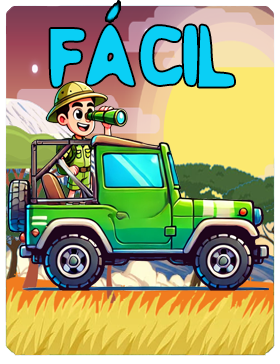
<style>
.page{position:relative;width:280px;height:364px}
.page>*{position:absolute;margin:0}
.t1{font:77.9px "Game_Time";color:#0acff5}
</style>
<div class="page">
<p class="t1" style="left:50px;top:25px;width:184px;height:62px">FACIL</p>
</div>
